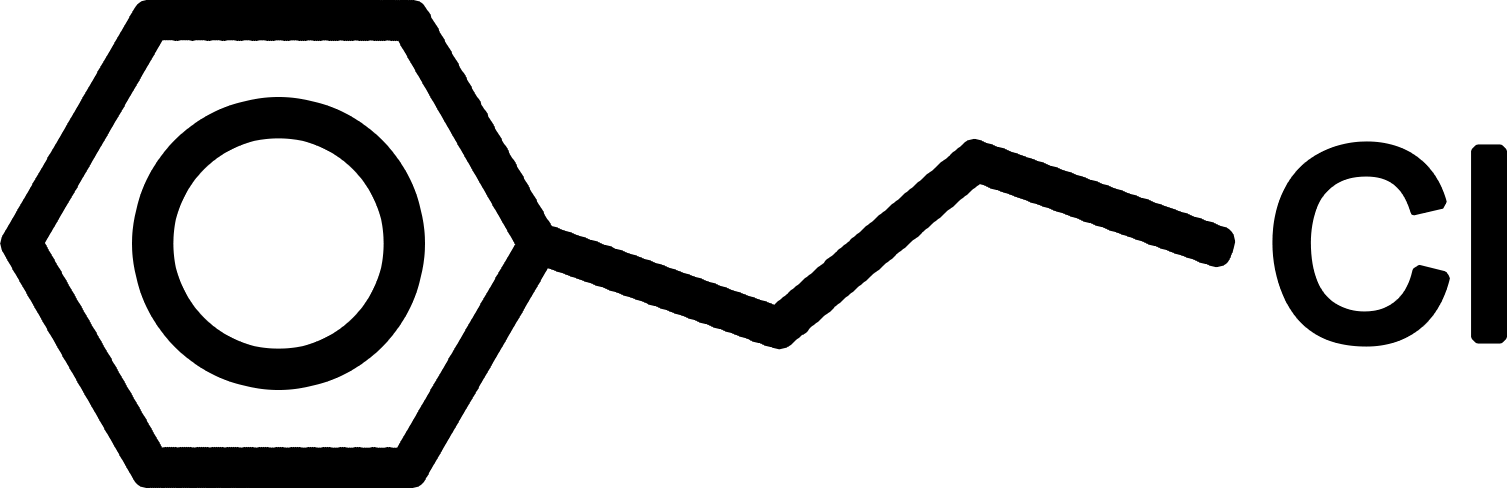
<style>
.page{position:relative;width:1508px;height:488px;background:#ffffff}
.page>*{position:absolute;margin:0}
.t1{font:260px "ArialMT";color:#000000;font-weight:bold}
</style>
<div class="page">
<p class="t1" style="left:1275px;top:144px;width:229px;height:200px">Cl</p>
</div>
